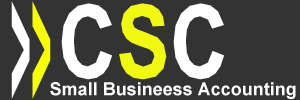
<style>
.page{position:relative;width:300px;height:100px;background:#333333}
.page>*{position:absolute;margin:0}
.t1{font:178.6px "Arial-BoldMT";color:#ffffff;scale:0.2 1}
.t2{font:178.6px "Arial-BoldMT";color:#f6ff06;scale:0.2 1}
.t3{font:102.3px "Arial-BoldMT";color:#ffffff;scale:0.79 1}
.t4{font:102.3px "Arial-BoldMT";color:#f1f913;scale:0.79 1}
.t5{font:18px "Arial-BoldMT";color:#ffffff}
</style>
<div class="page">
<p class="t1" style="left:11px;top:1px;width:40px;height:98px">&gt;<span class="t2">&gt;</span></p>
<p class="t3" style="left:61px;top:3px;width:163px;height:77px">C<span class="t4">S</span>C</p>
<p class="t5" style="left:50px;top:82px;width:246px;height:17px">Small Busineess Accounting</p>
</div>
